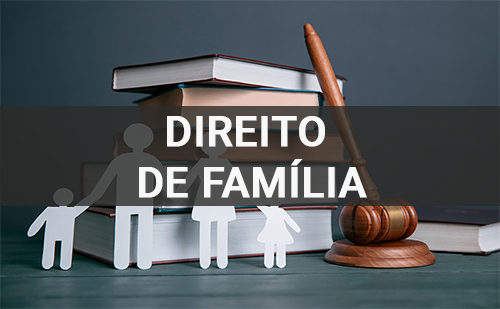
<style>
.page{position:relative;width:500px;height:309px}
.page>*{position:absolute;margin:0}
.t1{font:42px "Roboto-Medium";color:#f8f8f8;font-weight:bold}
</style>
<div class="page">
<p class="t1" style="left:139px;top:116px;width:228px;height:82px;text-align:center">DIREITO <br>DE FAMÍLIA</p>
</div>
